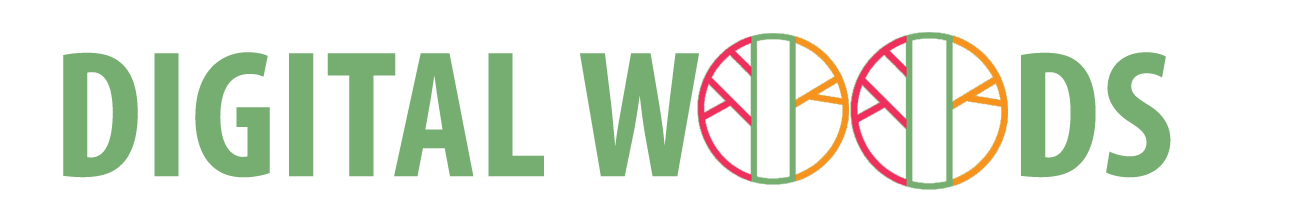
<style>
.page{position:relative;width:1311px;height:219px;background:#ffffff}
.page>*{position:absolute;margin:0}
.t1{font:182px "MyriadPro-BoldCond";letter-spacing:0.01em;color:#76ad71}
</style>
<div class="page">
<p class="t1" style="left:63px;top:52px;width:1108px;height:126px">DIGITAL W          DS</p>
</div>
